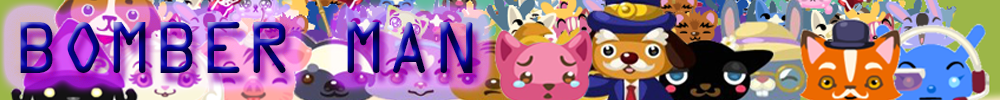
<style>
.page{position:relative;width:1000px;height:100px}
.page>*{position:absolute;margin:0}
.t1{font:65.1px "OCRAStd"}
</style>
<div class="page">
<p class="t1" style="left:20px;top:22px;width:453px;height:51px">BOMBER MAN</p>
</div>
